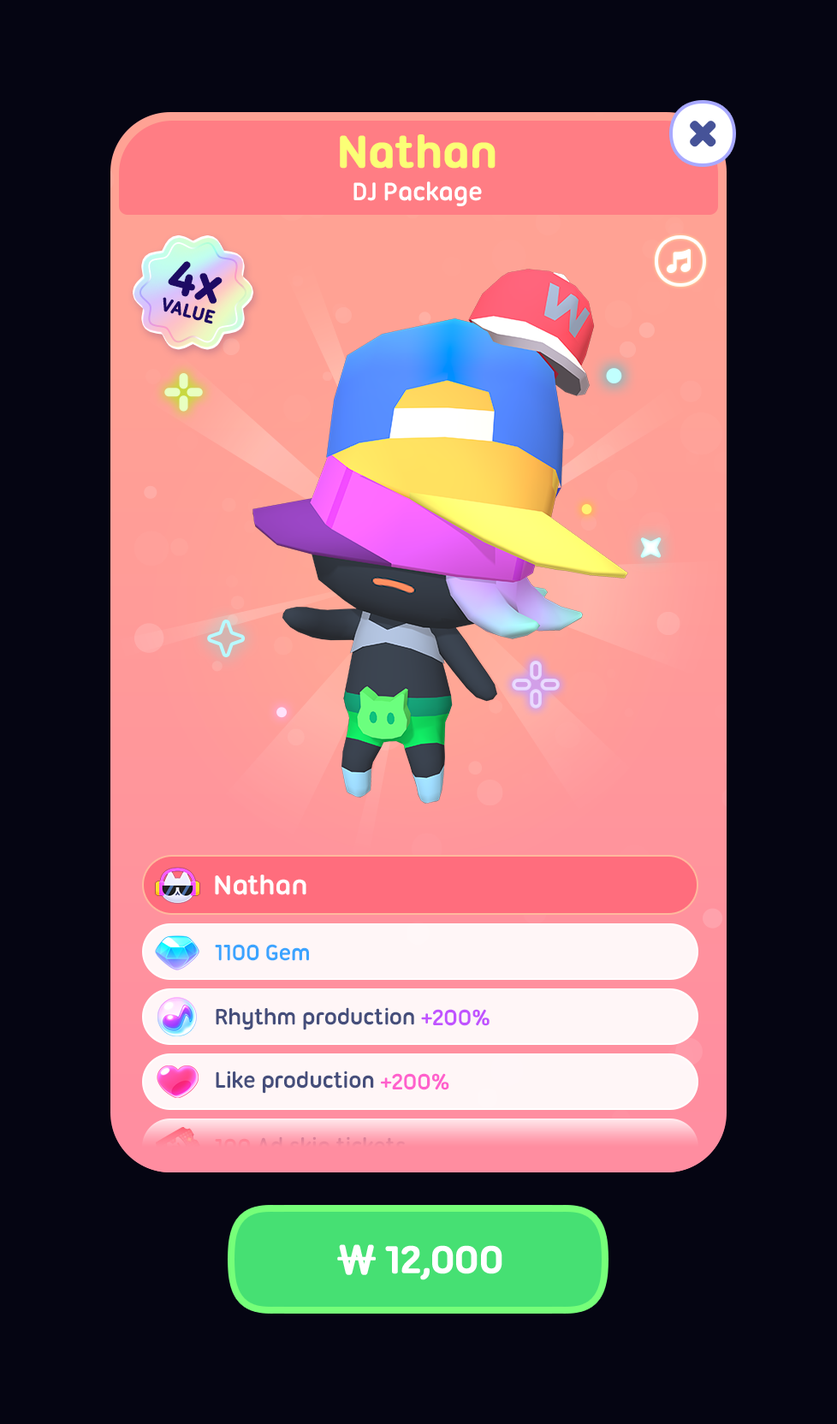
<style>
.page{position:relative;width:837px;height:1424px;background:#050512}
.page>*{position:absolute;margin:0}
.t1{font:47.9px "UbuntuTitling-Bold";letter-spacing:-0.025em;color:#fbff76;font-weight:bold}
.t2{font:27.4px "UbuntuTitling-Bold";letter-spacing:-0.025em;color:#ffffff}
.t3{font:49.9px "UbuntuTitling-Bold";letter-spacing:-0.025em;color:#1d0a64;font-weight:bold}
.t4{font:19.6px "UbuntuTitling-Bold";letter-spacing:-0.025em;color:#1d0a64;text-transform:uppercase;font-weight:bold}
.t5{font:29.1px "UbuntuTitling-Bold";letter-spacing:-0.025em;color:#ffffff}
.t6{font:24px "UbuntuTitling-Bold";letter-spacing:-0.025em;color:#3ba4ff}
.t7{font:24px "UbuntuTitling-Bold";letter-spacing:-0.025em;color:#454e7b}
.t8{font:24px "UbuntuTitling-Bold";letter-spacing:-0.025em;color:#c053ff}
.t9{font:24px "UbuntuTitling-Bold";letter-spacing:-0.025em;color:#ff60cc}
.t10{font:24px "UbuntuTitling-Bold";letter-spacing:-0.025em;color:#ff8da0}
.t11{font:41.1px "UbuntuTitling-Bold";letter-spacing:-0.04em;color:#ffffff;text-transform:uppercase;font-weight:bold}
.t12{font:41.1px "NanumSquareRoundOTFEB";letter-spacing:-0.04em;color:#ffffff;text-transform:uppercase;font-weight:bold}
</style>
<div class="page">
<p class="t1" style="left:340px;top:134px;width:156px;height:35px">Nathan</p>
<p class="t2" style="left:354px;top:181px;width:128px;height:25px">DJ Package</p>
<p class="t3" style="left:168px;top:261px;width:55px;height:43px;rotate:15deg">4x</p>
<p class="t4" style="left:163px;top:297px;width:53px;height:27px;rotate:15deg">Value</p>
<p class="t5" style="left:215px;top:875px;width:91px;height:20px">Nathan</p>
<p class="t6" style="left:215px;top:944px;width:94px;height:17px">1100 Gem</p>
<p class="t7" style="left:216px;top:1008px;width:274px;height:23px">Rhythm production <span class="t8">+200%</span></p>
<p class="t7" style="left:216px;top:1071px;width:233px;height:23px">Like production <span class="t9">+200%</span></p>
<p class="t10" style="left:215px;top:1137px;width:191px;height:23px">100 Ad skip tickets</p>
<p class="t11" style="left:337px;top:1245px;width:165px;height:36px"><span class="t12">₩ </span>12,000</p>
</div>
